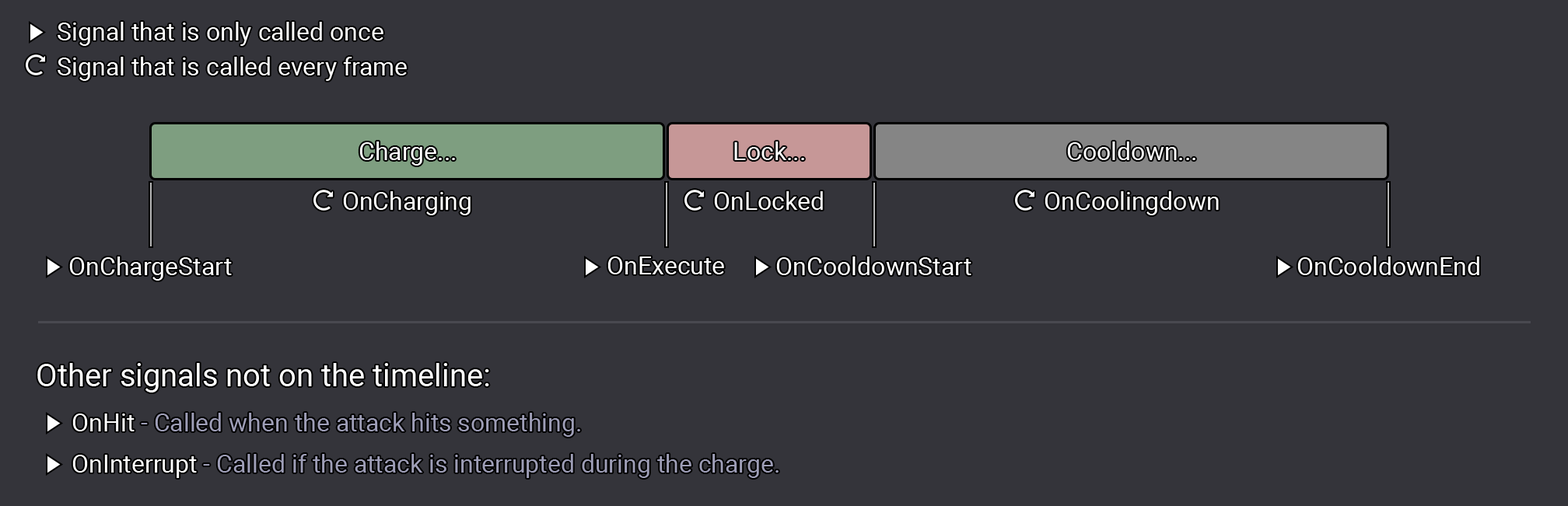
<style>
.page{position:relative;width:1568px;height:506px;background:#34343a}
.page>*{position:absolute;margin:0}
.t1{font:24.9px "Roboto-Regular";color:#ffffff}
.t2{font:31.1px "Roboto-Regular";color:#ffffff}
.t3{font:24.9px "Roboto-Regular";color:#9e9eb7}
</style>
<div class="page">
<p class="t1" style="left:58px;top:22px;width:325px;height:24px">Signal that is only called once</p>
<p class="t1" style="left:58px;top:57px;width:349px;height:24px">Signal that is called every frame</p>
<p class="t1" style="left:359px;top:142px;width:96px;height:24px">Charge...</p>
<p class="t1" style="left:734px;top:142px;width:70px;height:18px">Lock...</p>
<p class="t1" style="left:1067px;top:142px;width:128px;height:18px">Cooldown...</p>
<p class="t1" style="left:343px;top:191px;width:128px;height:24px">OnCharging</p>
<p class="t1" style="left:714px;top:191px;width:109px;height:19px">OnLocked</p>
<p class="t1" style="left:1045px;top:191px;width:174px;height:24px">OnCoolingdown</p>
<p class="t1" style="left:69px;top:257px;width:163px;height:24px">OnChargeStart</p>
<p class="t1" style="left:607px;top:257px;width:117px;height:18px">OnExecute</p>
<p class="t1" style="left:776px;top:257px;width:195px;height:18px">OnCooldownStart</p>
<p class="t1" style="left:1297px;top:257px;width:182px;height:18px">OnCooldownEnd</p>
<p class="t2" style="left:37px;top:363px;width:452px;height:30px">Other signals not on the timeline:</p>
<p class="t3" style="left:72px;top:413px;width:508px;height:24px"><span class="t1">OnHit </span>- Called when the attack hits something.</p>
<p class="t3" style="left:72px;top:454px;width:707px;height:24px"><span class="t1">OnInterrupt </span>- Called if the attack is interrupted during the charge.</p>
</div>
